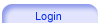
<style>
.page{position:relative;width:100px;height:23px;background:#e1e4fc}
.page>*{position:absolute;margin:0}
.t1{font:11px "ArialMT";color:#092ff6}
</style>
<div class="page">
<p class="t1" style="left:36px;top:12px;width:25px;height:11px">Login</p>
</div>
